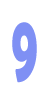
<style>
.page{position:relative;width:50px;height:110px;background:#ffffff}
.page>*{position:absolute;margin:0}
.t1{font:96px "BerlinSansFBDemi-Bold";color:#7f90f4;scale:0.5 1}
</style>
<div class="page">
<p class="t1" style="left:12px;top:22px;width:25px;height:61px">9</p>
</div>
